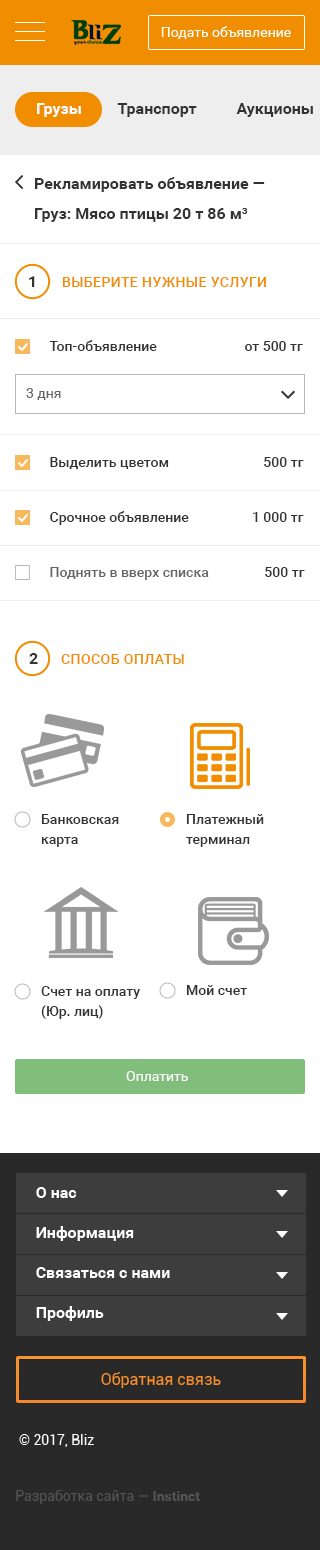
<style>
.page{position:relative;width:320px;height:1550px;background:#ffffff}
.page>*{position:absolute;margin:0}
.t1{font:16px/30px "Roboto-Bold";color:#333333}
.t2{font:16px "Roboto-Bold";color:#333333}
.t3{font:14px "Roboto-Medium";letter-spacing:0.03em;color:#f08d00;text-transform:uppercase}
.t4{font:14px "Roboto-Medium";color:#333333}
.t5{font:14px "Roboto-Regular";color:#666666}
.t6{font:14px "Roboto-Medium";color:#666666}
.t7{font:14px/20px "Roboto-Medium";color:#333333}
.t8{font:14px "Roboto-Regular";color:#ffffff}
</style>
<div class="page">
<p class="t1" style="left:35px;top:177px;width:230px;height:45px">Рекламировать объявление — <br>Груз: Мясо птицы 20 т 86 м³</p>
<p class="t2" style="left:29px;top:276px;width:6px;height:11px">1</p>
<p class="t3" style="left:62px;top:277px;width:204px;height:10px">Выберите нужные услуги</p>
<p class="t4" style="left:49px;top:340px;width:108px;height:11px">Топ-объявление</p>
<p class="t4" style="left:245px;top:341px;width:58px;height:10px">от 500 тг</p>
<p class="t5" style="left:26px;top:388px;width:35px;height:12px">3 дня</p>
<p class="t4" style="left:50px;top:457px;width:119px;height:12px">Выделить цветом</p>
<p class="t4" style="left:264px;top:457px;width:40px;height:10px">500 тг</p>
<p class="t4" style="left:50px;top:511px;width:139px;height:14px">Срочное объявление</p>
<p class="t4" style="left:253px;top:512px;width:51px;height:10px">1 000 тг</p>
<p class="t6" style="left:50px;top:567px;width:159px;height:13px">Поднять в вверх списка</p>
<p class="t4" style="left:265px;top:567px;width:40px;height:10px">500 тг</p>
<p class="t2" style="left:29px;top:653px;width:9px;height:11px">2</p>
<p class="t3" style="left:61px;top:654px;width:123px;height:10px">Способ оплаты</p>
<p class="t7" style="left:41px;top:814px;width:78px;height:33px">Банковская <br>карта</p>
<p class="t7" style="left:186px;top:814px;width:78px;height:33px">Платежный <br>терминал</p>
<p class="t7" style="left:41px;top:986px;width:99px;height:33px">Счет на оплату <br>(Юр. лиц)</p>
<p class="t4" style="left:186px;top:985px;width:61px;height:10px">Мой счет</p>
<p class="t8" style="left:126px;top:1071px;width:62px;height:10px">Оплатить</p>
</div>
